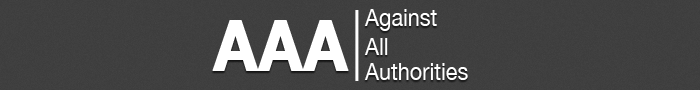
<style>
.page{position:relative;width:700px;height:90px;background:#404040}
.page>*{position:absolute;margin:0}
.t1{font:70px "HelveticaNeue-UltraLight";color:#ffffff;font-weight:bold;scale:0.9 1}
.t2{font:24px "HelveticaNeue";color:#ffffff;scale:0.9 1}
.t3{font:70px "HelveticaNeue-Bold";color:#ffffff;font-weight:bold;scale:0.9 1}
</style>
<div class="page">
<p class="t1" style="left:355px;top:10px;width:4px;height:71px">|</p>
<p class="t2" style="left:364px;top:9px;width:73px;height:22px">Against</p>
<p class="t3" style="left:212px;top:20px;width:137px;height:51px">AAA</p>
<p class="t2" style="left:364px;top:38px;width:24px;height:17px">All</p>
<p class="t2" style="left:364px;top:63px;width:104px;height:17px">Authorities</p>
</div>
